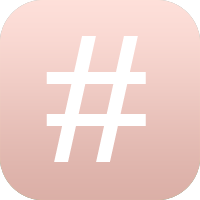
<style>
.page{position:relative;width:200px;height:200px}
.page>*{position:absolute;margin:0}
.t1{font:170px "ArialMT";color:#ffffff;scale:1.09 1}
</style>
<div class="page">
<p class="t1" style="left:46px;top:36px;width:100px;height:126px">#</p>
</div>
